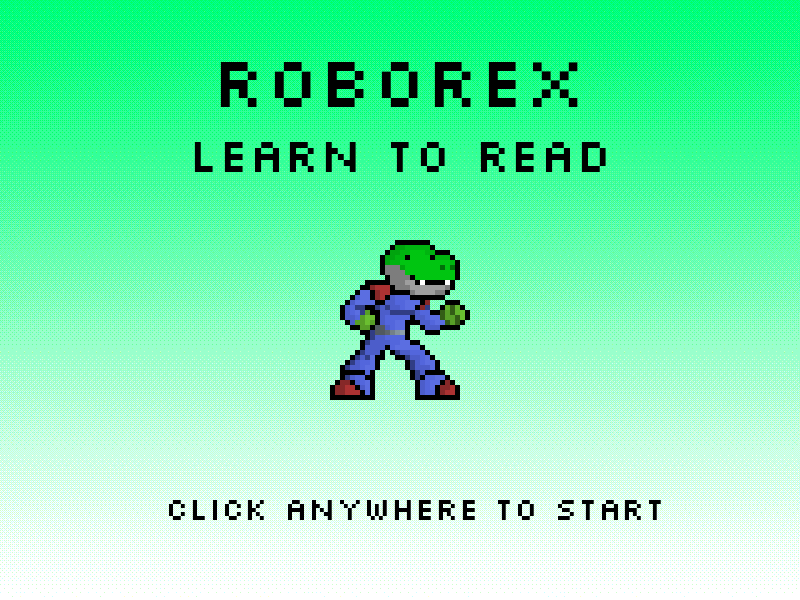
<style>
.page{position:relative;width:800px;height:600px}
.page>*{position:absolute;margin:0}
.t1{font:75px "Silkscreen";color:#000000}
.t2{font:50px "Silkscreen";color:#000000}
.t3{font:33.3px "Silkscreen";color:#000000}
</style>
<div class="page">
<p class="t1" style="left:220px;top:62px;width:358px;height:45px">roborex</p>
<p class="t2" style="left:194px;top:142px;width:412px;height:30px">Learn to read</p>
<p class="t3" style="left:169px;top:500px;width:492px;height:20px">Click anywhere to start</p>
</div>
